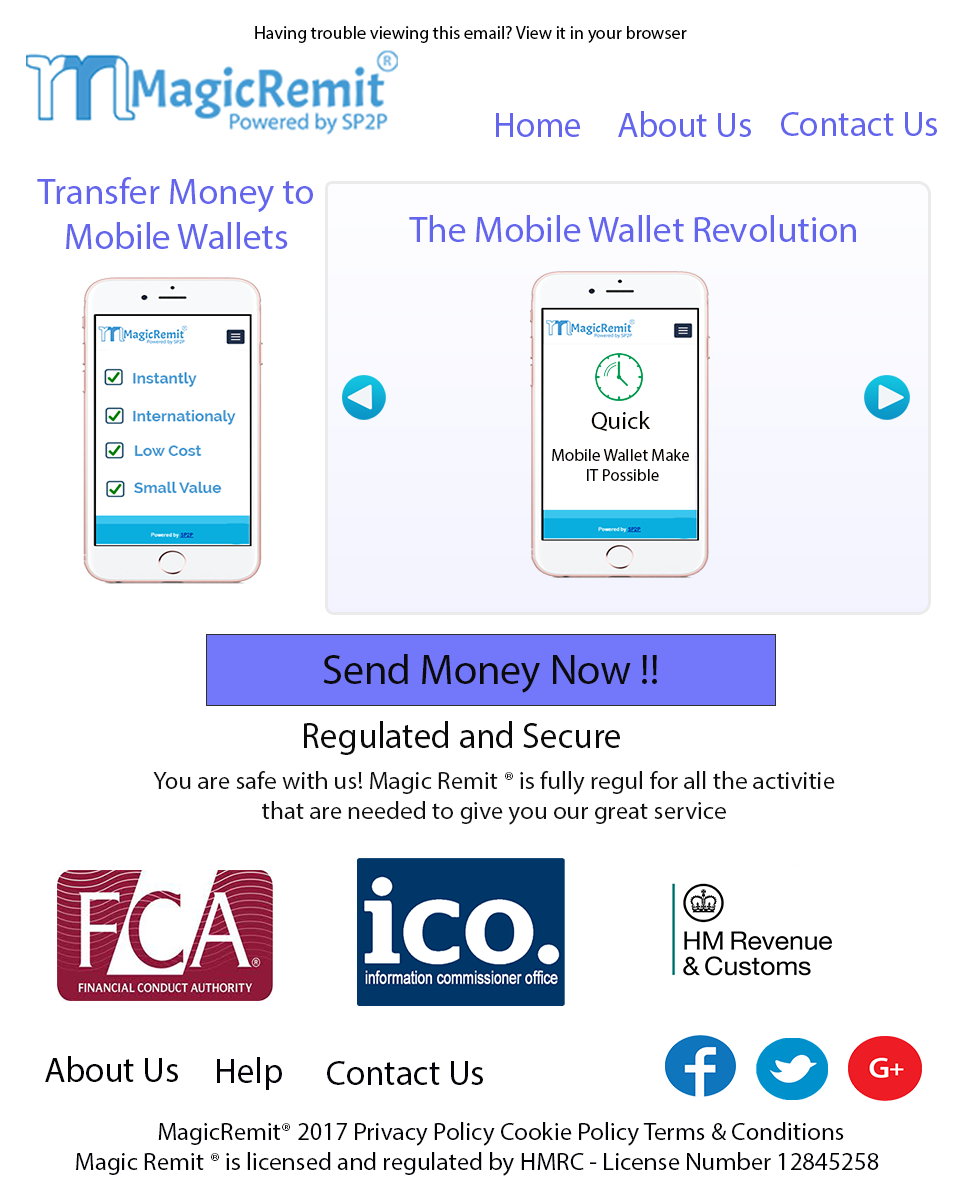
<style>
.page{position:relative;width:960px;height:1200px;background:#ffffff}
.page>*{position:absolute;margin:0}
.t1{font:18px "MyriadPro-Regular";color:#000000}
.t2{font:35.5px "MyriadPro-Regular";color:#6366ec}
.t3{font:37px "MyriadPro-Regular";color:#6366ec}
.t4{font:25px "MyriadPro-Regular";color:#060200}
.t5{font:17px "MyriadPro-Regular";color:#060200}
.t6{font:42px "MyriadPro-Regular";color:#0b0b0b}
.t7{font:37px "MyriadPro-Regular";color:#0b0b0b;scale:0.95 1}
.t8{font:25px "MyriadPro-Regular";color:#111111}
.t9{font:30px "MyriadPro-Regular";color:#111111}
.t10{font:35.5px "MyriadPro-Regular";color:#030306}
.t11{font:35.5px "MyriadPro-Regular";color:#04040a}
.t12{font:25px "MyriadPro-Regular";color:#040409}
</style>
<div class="page">
<p class="t1" style="left:255px;top:26px;width:432px;height:17px">Having trouble viewing this email? View it in your browser</p>
<p class="t2" style="left:496px;top:113px;width:84px;height:24px">Home</p>
<p class="t2" style="left:618px;top:111px;width:133px;height:26px">About Us</p>
<p class="t2" style="left:781px;top:112px;width:156px;height:24px">Contact Us</p>
<p class="t3" style="left:37px;top:177px;width:276px;height:72px;text-align:center">Transfer Money to Mobile Wallets</p>
<p class="t3" style="left:409px;top:215px;width:447px;height:27px">The Mobile Wallet Revolution</p>
<p class="t4" style="left:591px;top:411px;width:60px;height:21px">Quick</p>
<p class="t5" style="left:552px;top:449px;width:137px;height:32px;text-align:center">Mobile Wallet Make<br> IT Possible</p>
<p class="t6" style="left:323px;top:654px;width:334px;height:39px">Send Money Now !!</p>
<p class="t7" style="left:304px;top:721px;width:316px;height:34px">Regulated and Secure</p>
<p class="t8" style="left:153px;top:771px;width:682px;height:54px;text-align:center"><span class="t9"><br></span>You are safe with us! Magic Remit ® is fully regul for all the activitie<br>that are needed to give you our great service</p>
<p class="t10" style="left:45px;top:1056px;width:133px;height:26px">About Us</p>
<p class="t11" style="left:217px;top:1057px;width:65px;height:33px">Help</p>
<p class="t11" style="left:327px;top:1061px;width:156px;height:24px">Contact Us</p>
<p class="t12" style="left:76px;top:1122px;width:803px;height:54px;text-align:center">MagicRemit® 2017 Privacy Policy Cookie Policy Terms &amp; Conditions<br>Magic Remit ® is licensed and regulated by HMRC - License Number 12845258<br>Magic Remit ® is licensed and regulated by HMRC - License Number 12845258</p>
</div>
